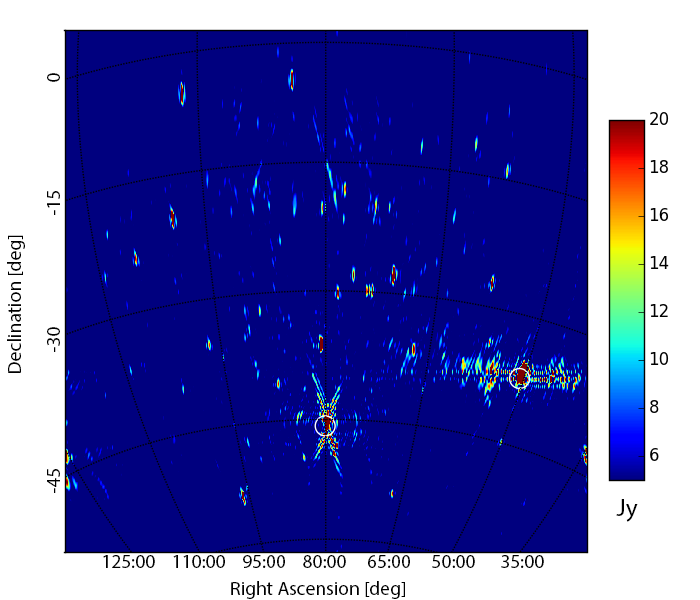
<style>
.page{position:relative;width:700px;height:600px;background:#00007f}
.page>*{position:absolute;margin:0}
.t1{font:19.4px "MyriadPro-Regular";color:#000000}
.t2{font:25px "MyriadPro-Regular";color:#000000}
</style>
<div class="page">
<p class="t1" style="left:47px;top:73px;width:13px;height:420px;rotate:-90deg">-45                            -30                           -15                          0</p>
<p class="t1" style="left:7px;top:235px;width:18px;height:138px;rotate:-90deg">Declination [deg]</p>
<p class="t2" style="left:616px;top:499px;width:22px;height:23px">Jy</p>
<p class="t1" style="left:103px;top:555px;width:441px;height:13px">125:00    110:00    95:00    80:00     65:00     50:00      35:00</p>
<p class="t1" style="left:231px;top:581px;width:174px;height:18px">Right Ascension [deg]</p>
</div>
